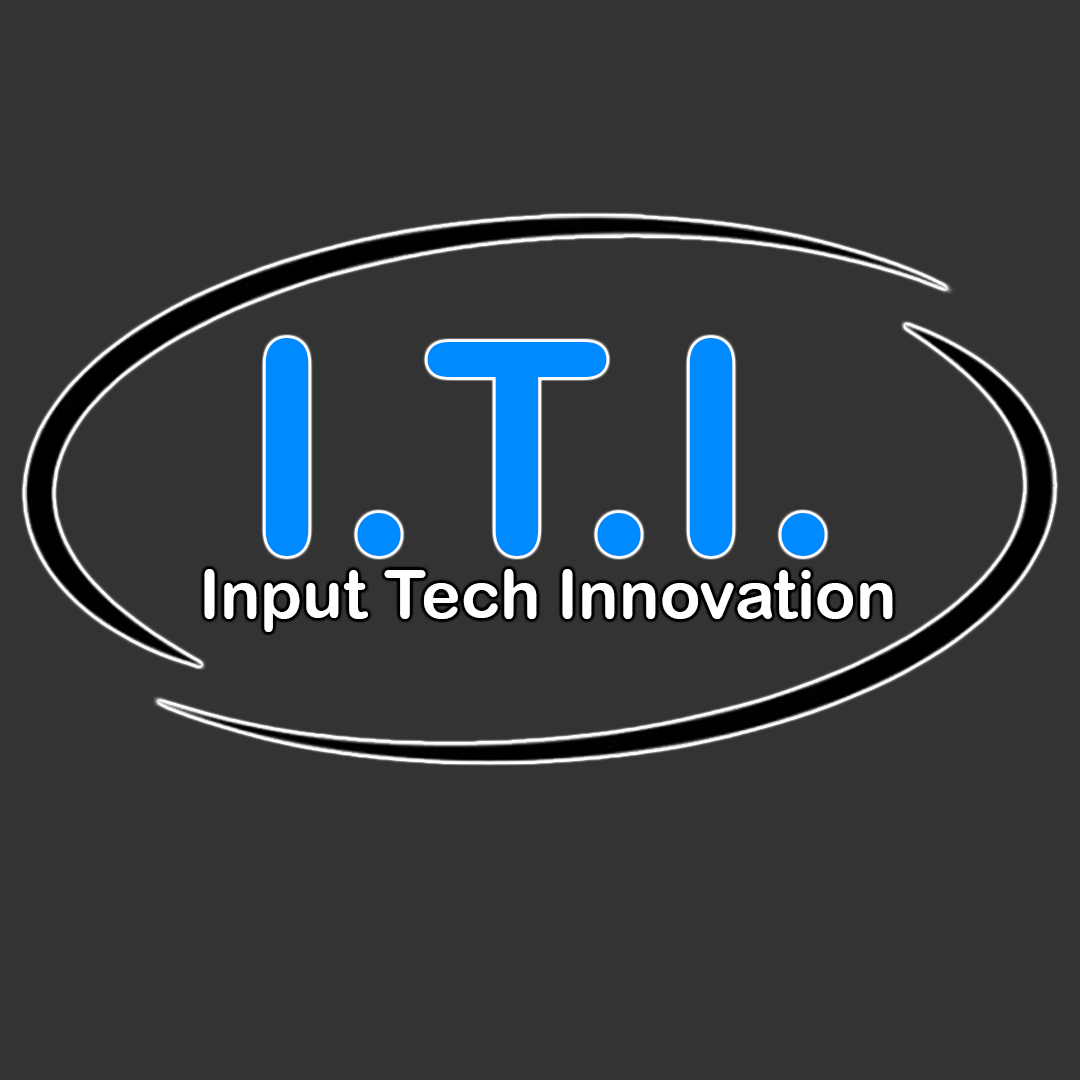
<style>
.page{position:relative;width:1080px;height:1080px;background:#333333}
.page>*{position:absolute;margin:0}
.t1{font:294.3px "ArialRoundedMTBold";color:#008aff}
.t2{font:67.3px "ArialRoundedMTBold";color:#ffffff}
</style>
<div class="page">
<p class="t1" style="left:265px;top:338px;width:560px;height:218px">I.T.I.</p>
<p class="t2" style="left:204px;top:569px;width:689px;height:63px">Input Tech Innovation</p>
</div>
